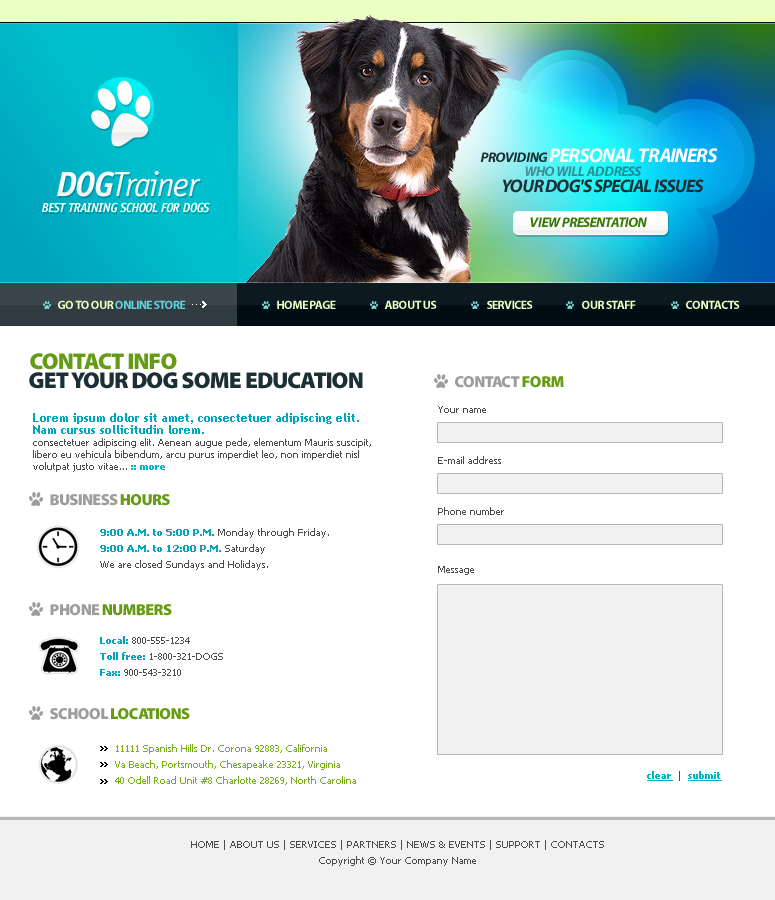
<style>
.page{position:relative;width:775px;height:900px;background:#ffffff}
.page>*{position:absolute;margin:0}
.t1{font:20px "MyriadPro-BoldIt";letter-spacing:-0.04em;color:#ffffff;text-transform:uppercase}
.t2{font:14px "MyriadPro-BoldIt";letter-spacing:-0.04em;color:#1c2f35;text-transform:uppercase}
.t3{font:35px "OfficinaSansStd-BookItalic";letter-spacing:-0.04em;color:#fbfbfb}
.t4{font:35px "OfficinaSansStd-BoldItalic";letter-spacing:-0.04em;color:#fbfbfb}
.t5{font:14px "MyriadPro-BoldIt";letter-spacing:-0.04em;color:#259297;text-transform:uppercase}
.t6{font:18px "MyriadPro-BoldIt";letter-spacing:-0.04em;color:#1c2f35;text-transform:uppercase}
.t7{font:13px "OfficinaSansStd-BoldItalic";letter-spacing:-0.04em;color:#fdfdfd}
.t8{font:14px "MyriadPro-BoldIt";letter-spacing:-0.04em;color:#367a03;text-transform:uppercase}
.t9{font:12px "MyriadPro-Bold";letter-spacing:-0.04em;color:#64d4dc;text-transform:uppercase}
.t10{font:12px "MyriadPro-Bold";letter-spacing:-0.04em;color:#ebffc3;text-transform:uppercase}
.t11{font:23px "MyriadPro-Black";letter-spacing:-0.04em;color:#659c13;text-transform:uppercase}
.t12{font:23px "MyriadPro-Black";letter-spacing:-0.04em;color:#1c2f35;text-transform:uppercase}
.t13{font:16px "MyriadPro-Black";letter-spacing:-0.04em;color:#9d9d9d;text-transform:uppercase}
.t14{font:16px "MyriadPro-Black";letter-spacing:-0.04em;color:#659c13;text-transform:uppercase}
.t15{font:10px/12px "Tahoma";color:#4b4b4b}
.t16{font:12px/12px "TrebuchetMS-Bold";color:#00a6bf}
.t17{font:10px/12px "Tahoma-Bold";color:#00b5c6}
.t18{font:10px "Tahoma";color:#4b4b4b}
.t19{font:10px/16px "Tahoma";color:#4b4b4b}
.t20{font:10px/16px "Tahoma-Bold";color:#00a6bf}
.t21{font:10px/16px "Tahoma";color:#7baf10}
.t22{font:10px "Tahoma-Bold";color:#00b5c6;text-decoration:underline}
</style>
<div class="page">
<p class="t1" style="left:480px;top:148px;width:238px;height:15px"><span class="t2">PROVIDING </span>PERSONAL TRAINERS</p>
<p class="t3" style="left:57px;top:171px;width:144px;height:26px"><span class="t4">DOG</span>Trainer</p>
<p class="t5" style="left:525px;top:166px;width:117px;height:10px">who will address</p>
<p class="t6" style="left:502px;top:179px;width:202px;height:14px">your dog's special issues</p>
<p class="t7" style="left:42px;top:202px;width:168px;height:11px">BEST TRAINING SCHOOL FOR DOGS</p>
<p class="t8" style="left:530px;top:217px;width:117px;height:10px">view presentation</p>
<p class="t9" style="left:58px;top:300px;width:128px;height:9px"><span class="t10">GO TO OUR </span>ONLINE STORE</p>
<p class="t10" style="left:277px;top:300px;width:59px;height:9px">HOME PAGE</p>
<p class="t10" style="left:384px;top:300px;width:53px;height:9px">ABOUT US</p>
<p class="t10" style="left:487px;top:300px;width:46px;height:9px">SERVICES</p>
<p class="t10" style="left:582px;top:300px;width:54px;height:9px">OUR STAFF</p>
<p class="t10" style="left:686px;top:300px;width:54px;height:9px">CONTACTS</p>
<p class="t11" style="left:30px;top:353px;width:147px;height:17px">CONTACT INFO</p>
<p class="t12" style="left:29px;top:372px;width:334px;height:17px">GET YOUR DOG SOME EDUCATION</p>
<p class="t13" style="left:455px;top:376px;width:109px;height:12px">CONTACT <span class="t14">FORM</span></p>
<p class="t15" style="left:33px;top:413px;width:338px;height:59px"><span class="t16">Lorem ipsum dolor sit amet, consectetuer adipiscing elit. Nam cursus sollicitudin lorem. <br></span>consectetuer adipiscing elit. Aenean augue pede, elementum Mauris suscipit, libero eu vehicula bibendum, arcu purus imperdiet leo, non imperdiet nisl volutpat justo vitae... <span class="t17">:: more</span></p>
<p class="t18" style="left:438px;top:406px;width:48px;height:7px">Your name</p>
<p class="t18" style="left:438px;top:456px;width:63px;height:8px">E-mail address</p>
<p class="t13" style="left:50px;top:494px;width:120px;height:12px">BUSINESS <span class="t14">HOURS</span></p>
<p class="t18" style="left:438px;top:507px;width:66px;height:8px">Phone number</p>
<p class="t19" style="left:100px;top:528px;width:229px;height:42px"><span class="t20">9:00 A.M. to 5:00 P.M.</span> Monday through Friday.<br><span class="t20">9:00 A.M. to 12:00 P.M.</span> Saturday<br>We are closed Sundays and Holidays.</p>
<p class="t18" style="left:438px;top:566px;width:36px;height:9px">Message</p>
<p class="t14" style="left:50px;top:604px;width:122px;height:12px"><span class="t13">PHONE </span>NUMBERS</p>
<p class="t19" style="left:100px;top:636px;width:123px;height:40px"><span class="t20">Local: </span>800-555-1234<br><span class="t20">Toll free: </span>1-800-321-DOGS<br><span class="t20">Fax:</span> 900-543-3210</p>
<p class="t14" style="left:50px;top:708px;width:140px;height:12px"><span class="t13">SCHOOL </span>LOCATIONS</p>
<p class="t21" style="left:115px;top:744px;width:241px;height:41px">11111 Spanish Hills Dr. Corona 92883, California<br>Va Beach, Portsmouth, Chesapeake 23321, Virginia<br>40 Odell Road Unit #8 Charlotte 28269, North Carolina</p>
<p class="t22" style="left:647px;top:771px;width:75px;height:10px">clear  <span class="t18">|  </span>submit</p>
<p class="t19" style="left:191px;top:840px;width:413px;height:26px;text-align:center">HOME | ABOUT US | SERVICES | PARTNERS | NEWS &amp; EVENTS | SUPPORT | CONTACTS<br>Copyright © Your Company Name</p>
</div>
